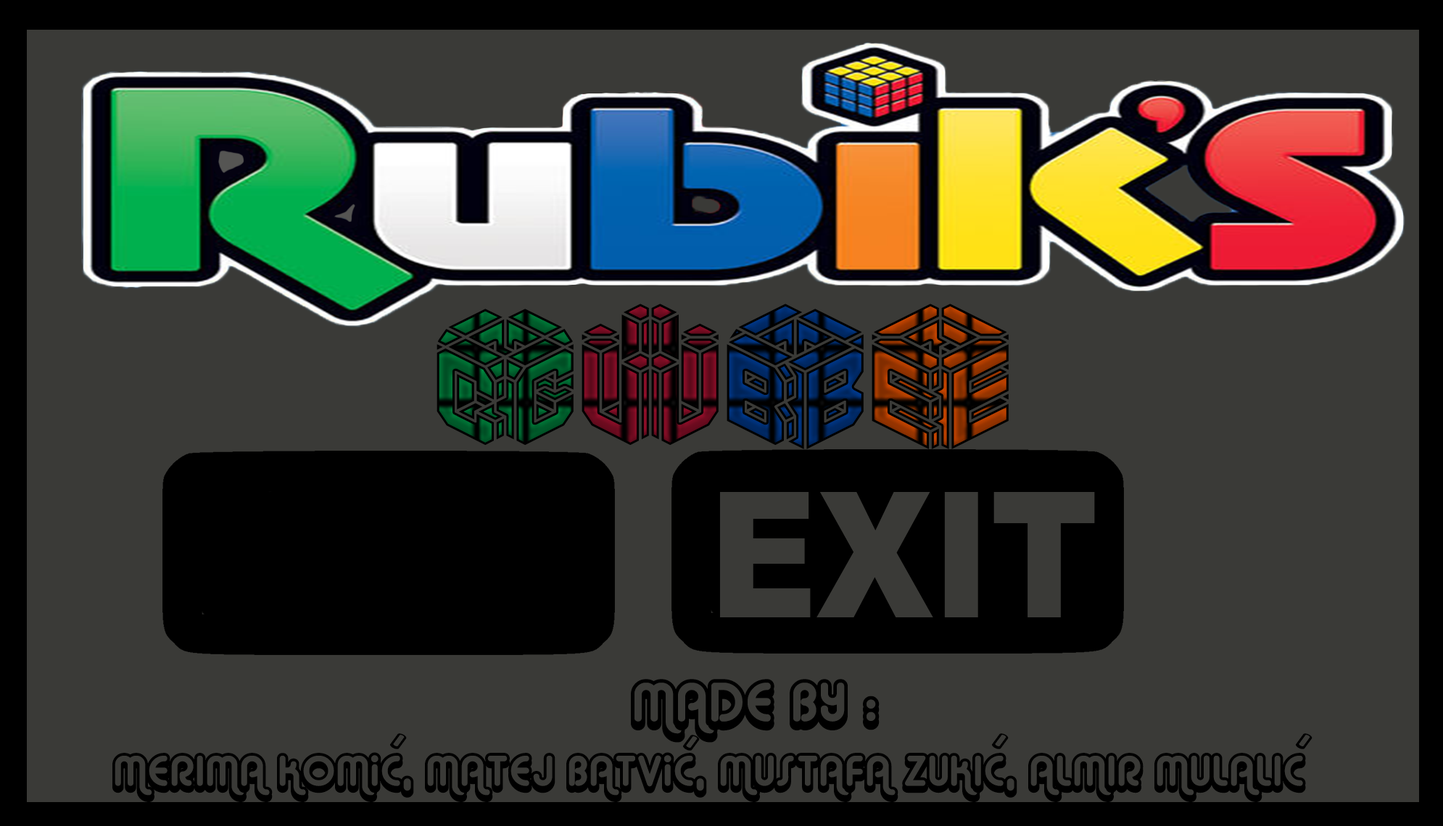
<style>
.page{position:relative;width:1443px;height:826px;background:#3a3a37}
.page>*{position:absolute;margin:0}
.t1{font:175.6px "Arial-Black";color:#3a3a37;scale:0.85 1}
.t2{font:54.4px "AlbaSuper";color:#000000}
.t3{font:17.8px "AlbaSuper";color:#000000;scale:2.03 1}
.t4{font:42.3px "AlbaSuper";color:#000000}
</style>
<div class="page">
<p class="t1" style="left:719px;top:492px;width:376px;height:126px">EXIT</p>
<p class="t2" style="left:631px;top:679px;width:248px;height:64px">MADE BY :</p>
<p class="t3" style="left:390px;top:734px;width:17px;height:16px;rotate:27deg">I</p>
<p class="t3" style="left:683px;top:735px;width:17px;height:16px;rotate:27deg">I</p>
<p class="t3" style="left:992px;top:734px;width:16px;height:16px;rotate:27deg">I</p>
<p class="t3" style="left:1296px;top:734px;width:16px;height:16px;rotate:27deg">I</p>
<p class="t4" style="left:112px;top:753px;width:1194px;height:50px">MERIMA KOMiC, MATEJ BATViC, MUSTAFA ZUKIC, ALMIR MULALIC</p>
</div>
